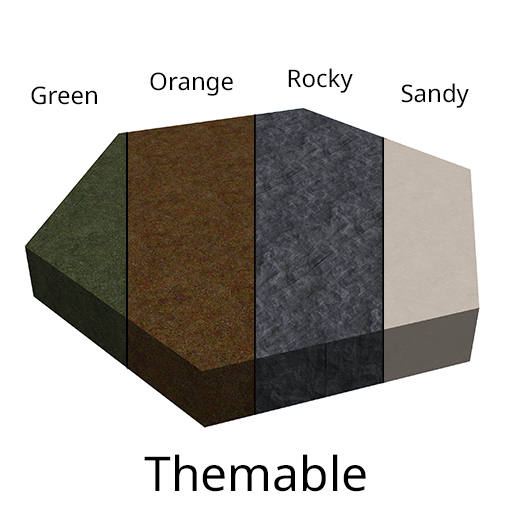
<style>
.page{position:relative;width:512px;height:512px;background:#ffffff}
.page>*{position:absolute;margin:0}
.t1{font:24px "NotoSans-Regular";color:#000000}
.t2{font:48px "NotoSans-Regular";color:#000000}
</style>
<div class="page">
<p class="t1" style="left:150px;top:72px;width:83px;height:24px">Orange</p>
<p class="t1" style="left:288px;top:68px;width:65px;height:25px">Rocky</p>
<p class="t1" style="left:31px;top:86px;width:66px;height:19px">Green</p>
<p class="t1" style="left:401px;top:83px;width:68px;height:25px">Sandy</p>
<p class="t2" style="left:144px;top:454px;width:222px;height:38px">Themable</p>
</div>
